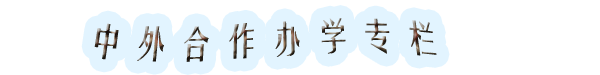
<style>
.page{position:relative;width:600px;height:75px;background:#ffffff}
.page>*{position:absolute;margin:0}
.t1{font:36px "FZYTK--GBK1-0";letter-spacing:0.005em}
</style>
<div class="page">
<p class="t1" style="left:94px;top:18px;width:343px;height:44px">中 外 合 作 办 学 专 栏</p>
</div>
